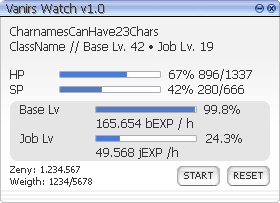
<style>
.page{position:relative;width:280px;height:203px;background:#e5e5e5}
.page>*{position:absolute;margin:0}
.t1{font:12px "Tahoma";color:#333333}
.t2{font:10px "Tahoma";color:#333333}
</style>
<div class="page">
<p class="t1" style="left:6px;top:3px;width:98px;height:10px">Vanirs Watch v1.0</p>
<p class="t1" style="left:10px;top:26px;width:242px;height:70px">CharnamesCanHave23Chars<br>ClassName // Base Lv. 42 • Job Lv. 19<br><br>HP                                    67% 896/1337<br>SP                                    42% 280/666</p>
<p class="t1" style="left:20px;top:105px;width:222px;height:54px">Base Lv                                    99.8%<br>                   165.654 bEXP / h<br>Job Lv                                      24.3%<br>                   49.568 jEXP /h</p>
<p class="t2" style="left:10px;top:166px;width:82px;height:21px">Zeny: 1.234.567<br>Weigth: 1234/5678</p>
<p class="t2" style="left:184px;top:172px;width:29px;height:7px">START</p>
<p class="t2" style="left:234px;top:172px;width:29px;height:7px">RESET</p>
</div>
